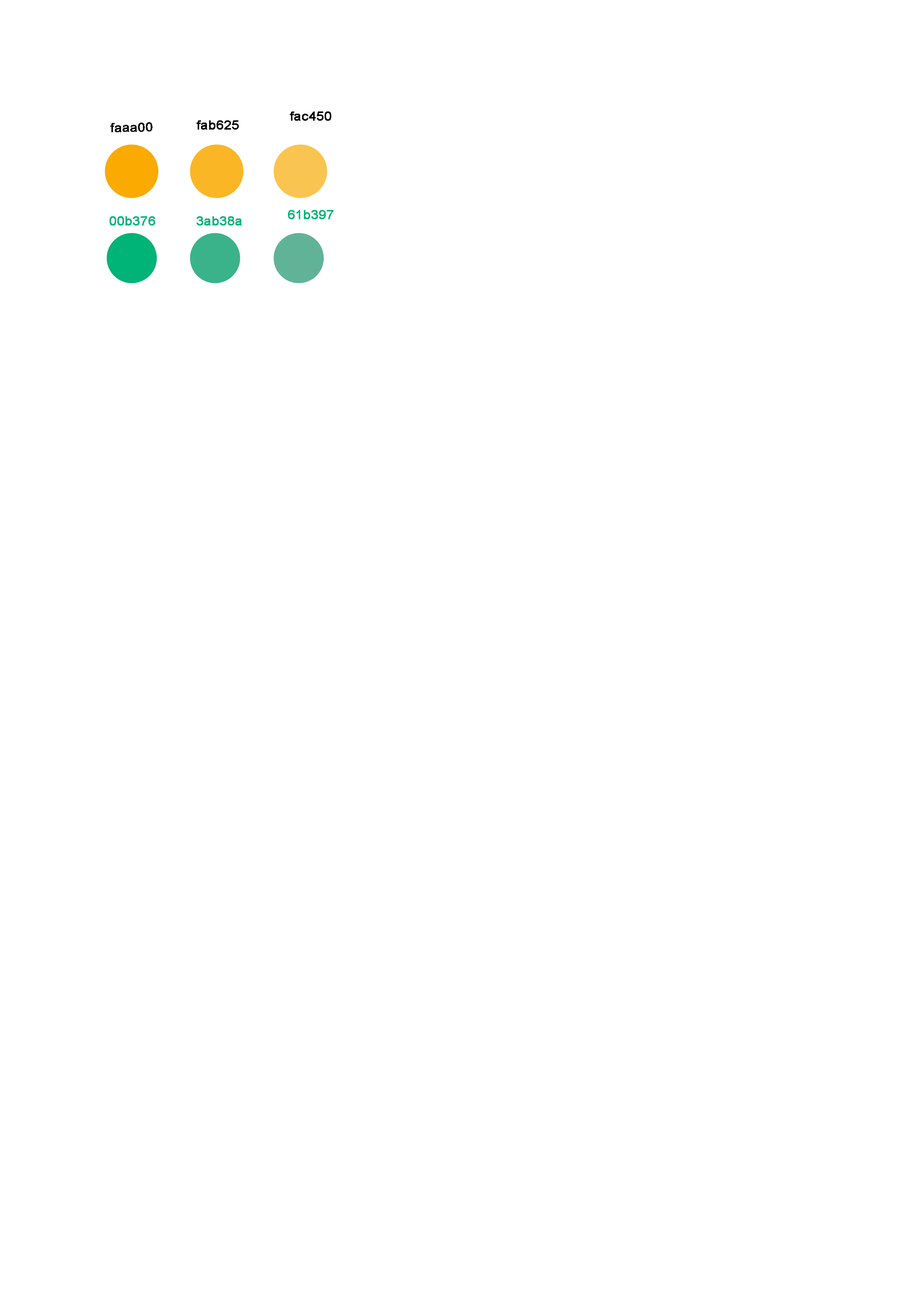
<style>
.page{position:relative;width:918px;height:1299px;background:#ffffff}
.page>*{position:absolute;margin:0}
.t1{font:12.2px "ArialMT";letter-spacing:0.02em;color:#000000;font-weight:bold;scale:1.05 1}
.t2{font:12.2px "ArialMT";letter-spacing:0.02em;color:#00b376;font-weight:bold;scale:1.05 1}
</style>
<div class="page">
<p class="t1" style="left:290px;top:111px;width:41px;height:10px">fac450</p>
<p class="t1" style="left:110px;top:122px;width:43px;height:10px;rotate:-1deg">faaa00</p>
<p class="t1" style="left:197px;top:120px;width:42px;height:10px">fab625</p>
<p class="t2" style="left:288px;top:210px;width:46px;height:9px">61b397</p>
<p class="t2" style="left:110px;top:216px;width:45px;height:9px">00b376</p>
<p class="t2" style="left:197px;top:216px;width:45px;height:9px">3ab38a</p>
</div>
